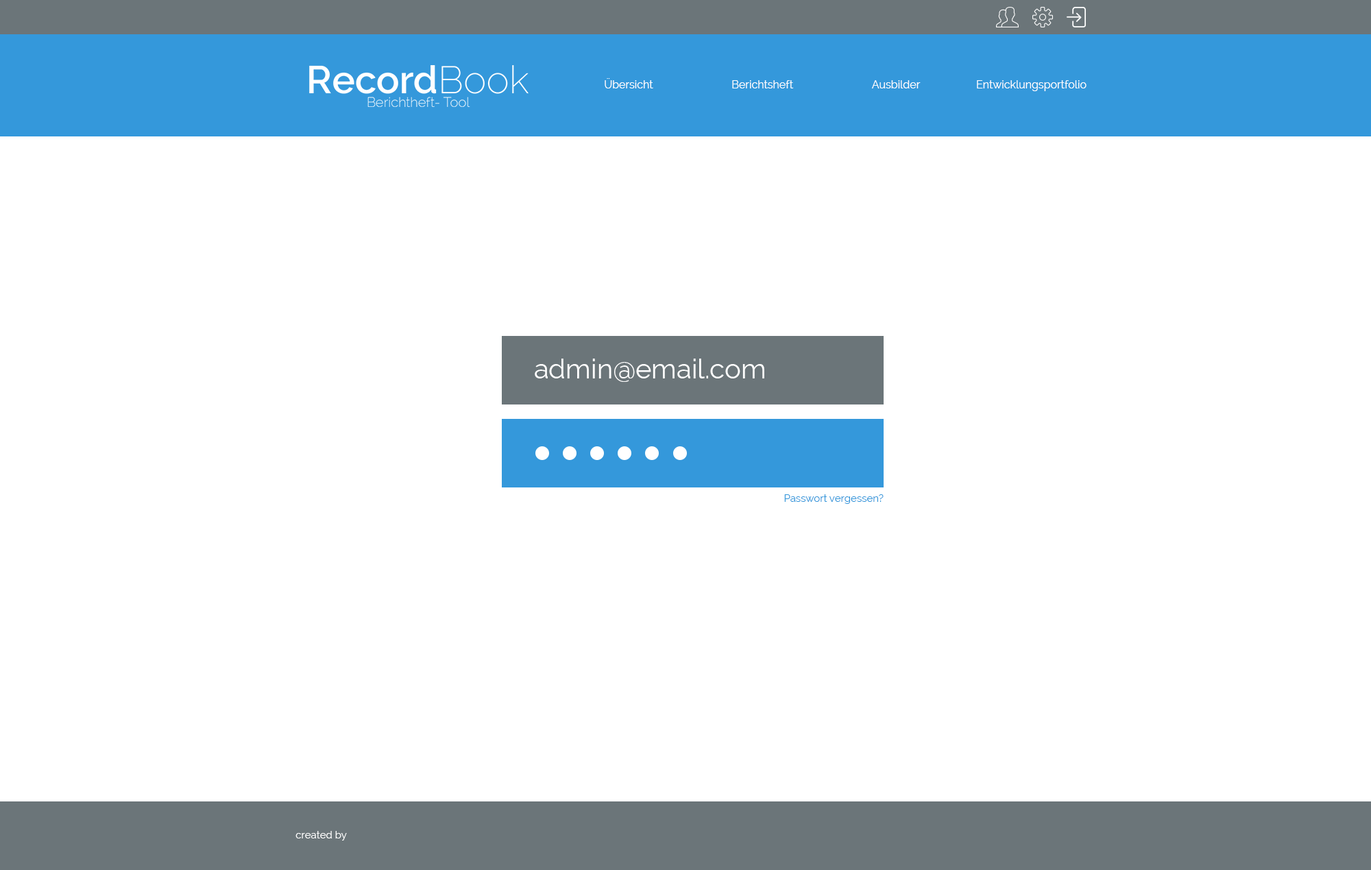
<style>
.page{position:relative;width:1371px;height:870px;background:#ffffff}
.page>*{position:absolute;margin:0}
.t1{font:11px "Raleway";color:#ffffff}
.t2{font:27.4px "Raleway";color:#ffffff}
.t3{font:10.3px "Raleway";color:#3498db}
.t4{font:10.3px "Raleway";color:#ffffff}
</style>
<div class="page">
<p class="t1" style="left:605px;top:78px;width:48px;height:10px">Übersicht</p>
<p class="t1" style="left:732px;top:80px;width:62px;height:8px">Berichtsheft</p>
<p class="t1" style="left:871px;top:80px;width:50px;height:8px">Ausbilder</p>
<p class="t1" style="left:977px;top:80px;width:109px;height:11px">Entwicklungsportfolio</p>
<p class="t2" style="left:535px;top:358px;width:229px;height:24px">admin@email.com</p>
<p class="t3" style="left:784px;top:494px;width:100px;height:10px">Passwort vergessen?</p>
<p class="t4" style="left:295px;top:831px;width:52px;height:9px">created by</p>
</div>
